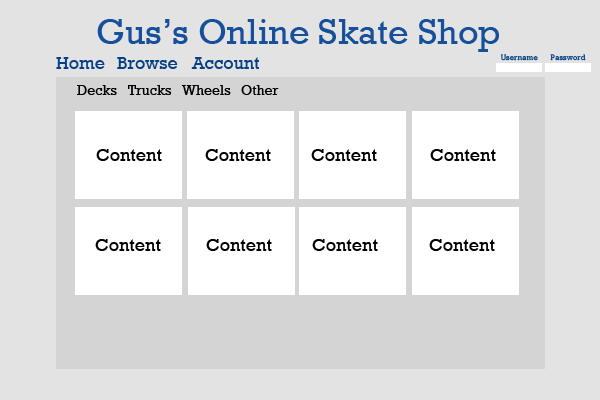
<style>
.page{position:relative;width:600px;height:400px;background:#e3e3e3}
.page>*{position:absolute;margin:0}
.t1{font:36px "Rockwell";color:#164f9b}
.t2{font:8px "Rockwell";color:#074085}
.t3{font:18px "Rockwell";color:#074085}
.t4{font:14px "Rockwell";color:#000000}
.t5{font:18px "Rockwell";color:#000000}
</style>
<div class="page">
<p class="t1" style="left:97px;top:19px;width:402px;height:33px">Gus’s Online Skate Shop</p>
<p class="t2" style="left:500px;top:54px;width:38px;height:7px">Username</p>
<p class="t2" style="left:550px;top:54px;width:36px;height:7px">Password</p>
<p class="t3" style="left:56px;top:57px;width:49px;height:12px">Home</p>
<p class="t3" style="left:117px;top:57px;width:61px;height:12px">Browse</p>
<p class="t3" style="left:191px;top:57px;width:68px;height:12px">Account</p>
<p class="t4" style="left:77px;top:85px;width:40px;height:10px">Decks</p>
<p class="t4" style="left:128px;top:85px;width:44px;height:10px">Trucks</p>
<p class="t4" style="left:181px;top:85px;width:50px;height:10px">Wheels</p>
<p class="t4" style="left:241px;top:85px;width:38px;height:10px">Other</p>
<p class="t5" style="left:96px;top:149px;width:66px;height:12px">Content</p>
<p class="t5" style="left:205px;top:149px;width:66px;height:12px">Content</p>
<p class="t5" style="left:311px;top:149px;width:66px;height:12px">Content</p>
<p class="t5" style="left:430px;top:149px;width:66px;height:12px">Content</p>
<p class="t5" style="left:95px;top:239px;width:66px;height:12px">Content</p>
<p class="t5" style="left:206px;top:239px;width:66px;height:12px">Content</p>
<p class="t5" style="left:312px;top:239px;width:66px;height:12px">Content</p>
<p class="t5" style="left:429px;top:239px;width:66px;height:12px">Content</p>
</div>
